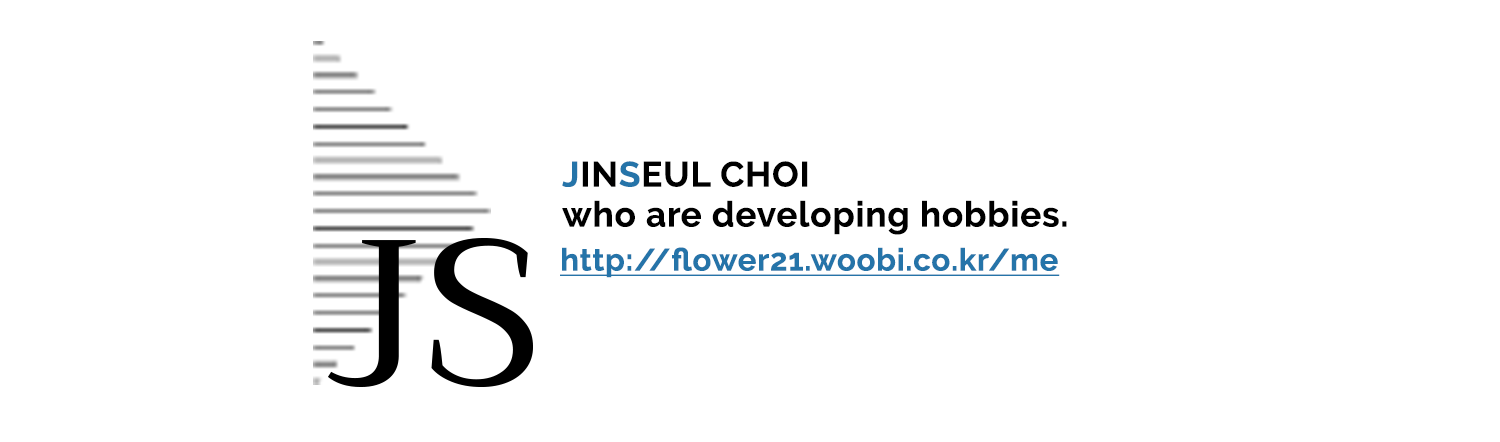
<style>
.page{position:relative;width:1500px;height:442px;background:#ffffff}
.page>*{position:absolute;margin:0}
.t1{font:35px/40px "Raleway-Bold";color:#000000;font-weight:bold}
.t2{font:35px/40px "Raleway-Bold";color:#2574a9;font-weight:bold}
.t3{font:31px "Raleway-Bold";color:#2574a9;font-weight:bold;text-decoration:underline}
</style>
<div class="page">
<p class="t1" style="left:562px;top:161px;width:505px;height:74px"><span class="t2">J</span>IN<span class="t2">S</span>EUL CHOI<br>who are developing hobbies.</p>
<p class="t3" style="left:560px;top:247px;width:500px;height:31px">http://flower21.woobi.co.kr/me</p>
</div>
